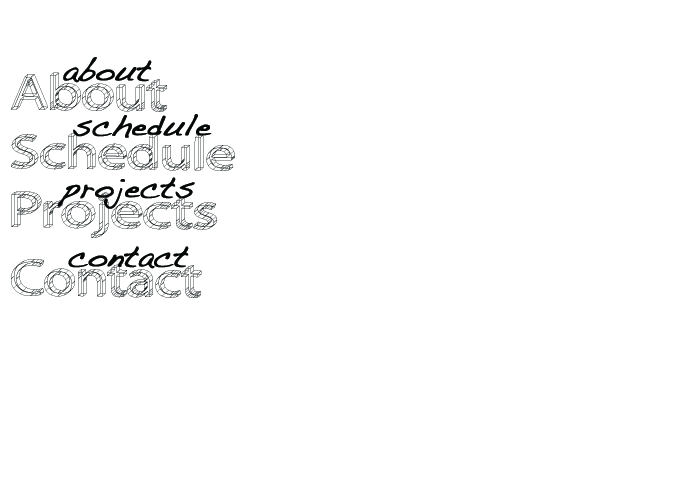
<style>
.page{position:relative;width:700px;height:500px;background:#ffffff}
.page>*{position:absolute;margin:0}
.t1{font:30px "Handwriting-Dakota";color:#060808;font-weight:bold}
</style>
<div class="page">
<p class="t1" style="left:63px;top:57px;width:89px;height:26px">about</p>
<p class="t1" style="left:73px;top:114px;width:139px;height:24px">schedule</p>
<p class="t1" style="left:57px;top:177px;width:138px;height:32px">projects</p>
</div>
